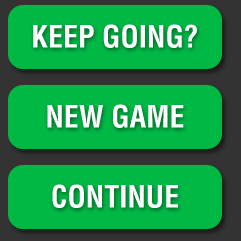
<style>
.page{position:relative;width:241px;height:241px;background:#00b945}
.page>*{position:absolute;margin:0}
.t1{font:30px "Helvetica-Condensed-Bold";color:#ffffff}
</style>
<div class="page">
<p class="t1" style="left:33px;top:24px;width:164px;height:24px">KEEP GOING?</p>
<p class="t1" style="left:47px;top:104px;width:137px;height:24px">NEW GAME</p>
<p class="t1" style="left:52px;top:184px;width:126px;height:24px">CONTINUE</p>
</div>
